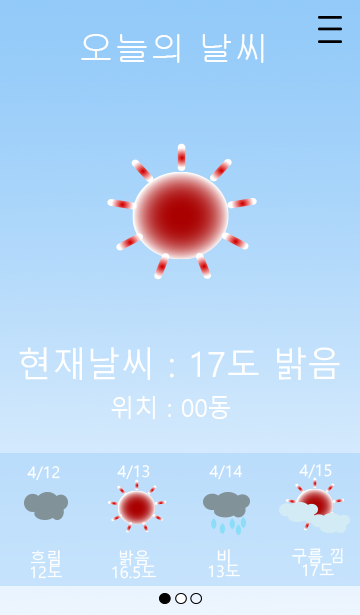
<style>
.page{position:relative;width:360px;height:615px}
.page>*{position:absolute;margin:0}
.t1{font:35.7px "Gulim";color:#ffffff}
.t2{font:34.6px "MalgunGothicRegular";color:#ffffff}
.t3{font:24.9px "MalgunGothicRegular";color:#ffffff}
.t4{font:16px "MalgunGothicRegular";color:#ffffff}
.t5{font:16px/13.9px "MalgunGothicRegular";color:#ffffff}
</style>
<div class="page">
<p class="t1" style="left:81px;top:34px;width:183px;height:29px">오늘의 날씨</p>
<p class="t2" style="left:19px;top:347px;width:321px;height:33px">현재날씨 : 17도 밝음</p>
<p class="t3" style="left:111px;top:396px;width:120px;height:23px">위치 : 00동</p>
<p class="t4" style="left:27px;top:466px;width:33px;height:15px">4/12</p>
<p class="t4" style="left:117px;top:465px;width:33px;height:15px">4/13</p>
<p class="t4" style="left:209px;top:465px;width:33px;height:15px">4/14</p>
<p class="t4" style="left:299px;top:464px;width:33px;height:15px">4/15</p>
<p class="t5" style="left:30px;top:550px;width:32px;height:29px;text-align:center">흐림<br>12도</p>
<p class="t5" style="left:112px;top:550px;width:45px;height:29px;text-align:center">밝음<br>16.5도</p>
<p class="t5" style="left:208px;top:549px;width:32px;height:29px;text-align:center">비<br>13도</p>
<p class="t5" style="left:292px;top:548px;width:51px;height:29px;text-align:center">구름 낌<br>17도</p>
</div>
